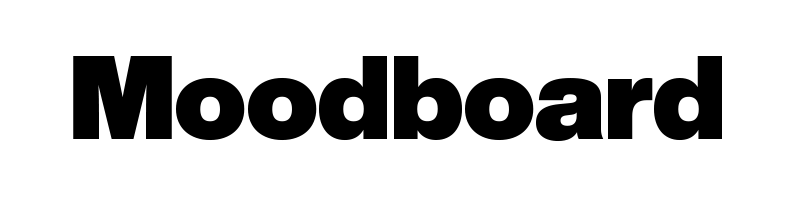
<style>
.page{position:relative;width:796px;height:197px;background:#ffffff}
.page>*{position:absolute;margin:0}
.t1{font:116.7px "HelveticaNowDisplay-XBlk";letter-spacing:-0.01em;color:#000000}
</style>
<div class="page">
<p class="t1" style="left:73px;top:56px;width:649px;height:86px">Moodboard</p>
</div>
